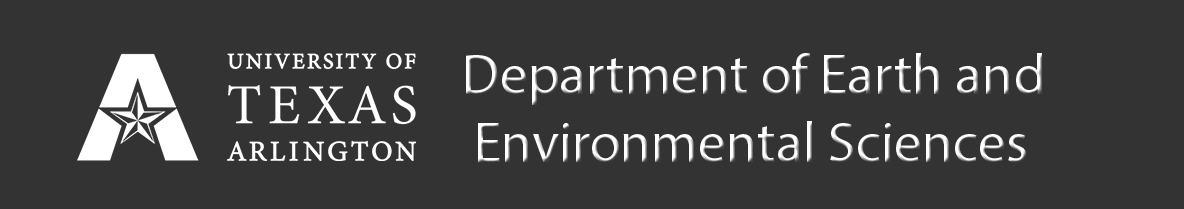
<style>
.page{position:relative;width:1184px;height:209px;background:#333333}
.page>*{position:absolute;margin:0}
.t1{font:56.4px "MyriadPro-Regular"}
</style>
<div class="page">
<p class="t1" style="left:466px;top:53px;width:577px;height:109px">Department of Earth and <br> Environmental Sciences</p>
</div>
